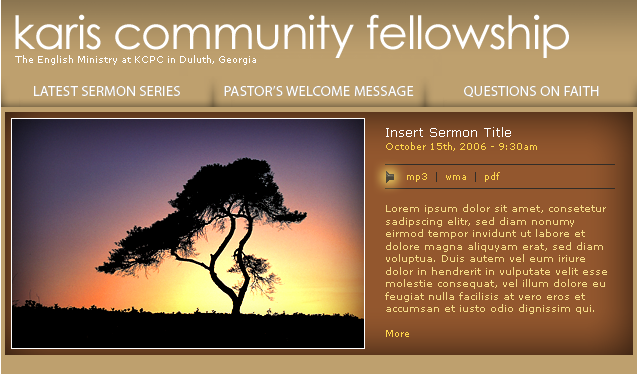
<style>
.page{position:relative;width:638px;height:374px}
.page>*{position:absolute;margin:0}
.t1{font:45.8px "CenturyGothic";letter-spacing:-0.025em;color:#ffffff}
.t2{font:9.4px "Verdana";color:#ffffff}
.t3{font:14.6px "MyriadPro-Regular";letter-spacing:0.015em;color:#ffffff;text-transform:uppercase}
.t4{font:10.4px/12.5px "Verdana";color:#f5dc87}
.t5{font:12.5px/12.5px "Verdana";color:#ffffff}
.t6{font:9.4px/12.5px "Verdana";color:#ffd74b}
.t7{font:9.4px "Verdana";color:#ffd74b}
.t8{font:9.4px "Verdana";color:#322d28}
</style>
<div class="page">
<p class="t1" style="left:15px;top:14px;width:554px;height:44px">karis community fellowship</p>
<p class="t2" style="left:15px;top:55px;width:241px;height:10px">The English Ministry at KCPC in Duluth, Georgia</p>
<p class="t3" style="left:34px;top:85px;width:565px;height:13px">Latest Sermon Series             pastor’s Welcome Message               Questions on Faith</p>
<p class="t3" style="left:34px;top:85px;width:565px;height:13px">Latest Sermon Series             pastor’s Welcome Message               Questions on Faith</p>
<p class="t4" style="left:385px;top:127px;width:222px;height:210px"><span class="t5">Insert Sermon Title<br></span><span class="t6">October 15th, 2006 - 9:30am<br><br><br><br><br></span>Lorem ipsum dolor sit amet, consetetur sadipscing elitr, sed diam nonumy eirmod tempor invidunt ut labore et dolore magna aliquyam erat, sed diam voluptua. Duis autem vel eum iriure dolor in hendrerit in vulputate velit esse molestie consequat, vel illum dolore eu feugiat nulla facilisis at vero eros et accumsan et iusto odio dignissim qui.<br><br><span class="t6">More</span></p>
<p class="t7" style="left:407px;top:172px;width:93px;height:10px">mp3 <span class="t8"> |  </span>wma<span class="t8">  |  </span>pdf</p>
</div>
